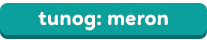
<style>
.page{position:relative;width:207px;height:40px;background:#0ca09c}
.page>*{position:absolute;margin:0}
.t1{font:22px "Linotte-Bold";color:#ffffff}
</style>
<div class="page">
<p class="t1" style="left:38px;top:11px;width:130px;height:20px">tunog: meron</p>
</div>
